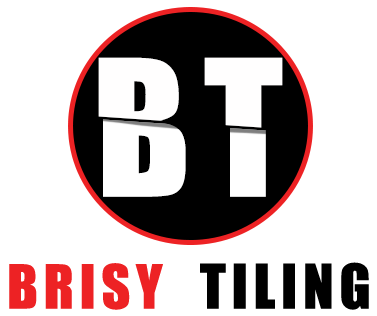
<style>
.page{position:relative;width:377px;height:316px;background:#ffffff}
.page>*{position:absolute;margin:0}
.t1{font:172px "Impact";letter-spacing:0.1em;color:#fffefe}
.t2{font:172px "Impact";letter-spacing:0.1em;color:#ffffff}
.t3{font:56.2px "Impact";letter-spacing:0.1em;color:#ed2224}
.t4{font:56.8px "Impact";letter-spacing:0.1em;color:#000000}
</style>
<div class="page">
<p class="t1" style="left:98px;top:57px;width:185px;height:137px">BT</p>
<p class="t2" style="left:103px;top:60px;width:184px;height:137px">BT</p>
<p class="t3" style="left:9px;top:263px;width:154px;height:47px">BRISY</p>
<p class="t4" style="left:200px;top:262px;width:169px;height:48px">TILING</p>
</div>
